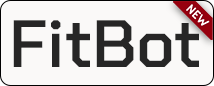
<style>
.page{position:relative;width:214px;height:86px;background:#faf9f8}
.page>*{position:absolute;margin:0}
.t1{font:66.7px "ChakraPetch-SemiBold";color:#262626}
</style>
<div class="page">
<p class="t1" style="left:13px;top:20px;width:186px;height:47px">FitBot</p>
</div>
